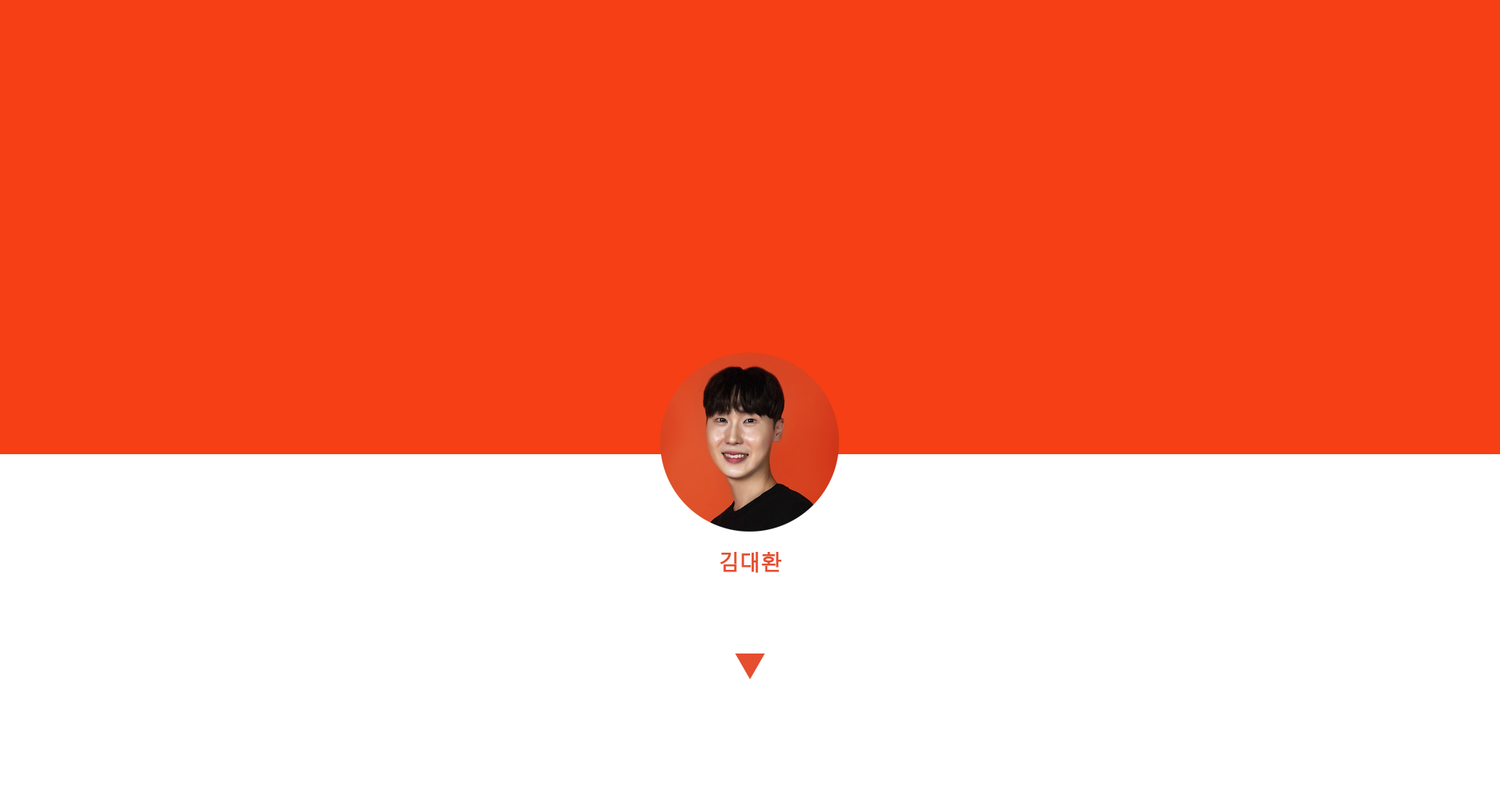
<style>
.page{position:relative;width:1500px;height:795px;background:#f63f14}
.page>*{position:absolute;margin:0}
.t1{font:20.8px "MalgunGothic";color:#e54e2f;font-weight:bold}
</style>
<div class="page">
<p class="t1" style="left:721px;top:552px;width:61px;height:21px">김대환</p>
</div>
